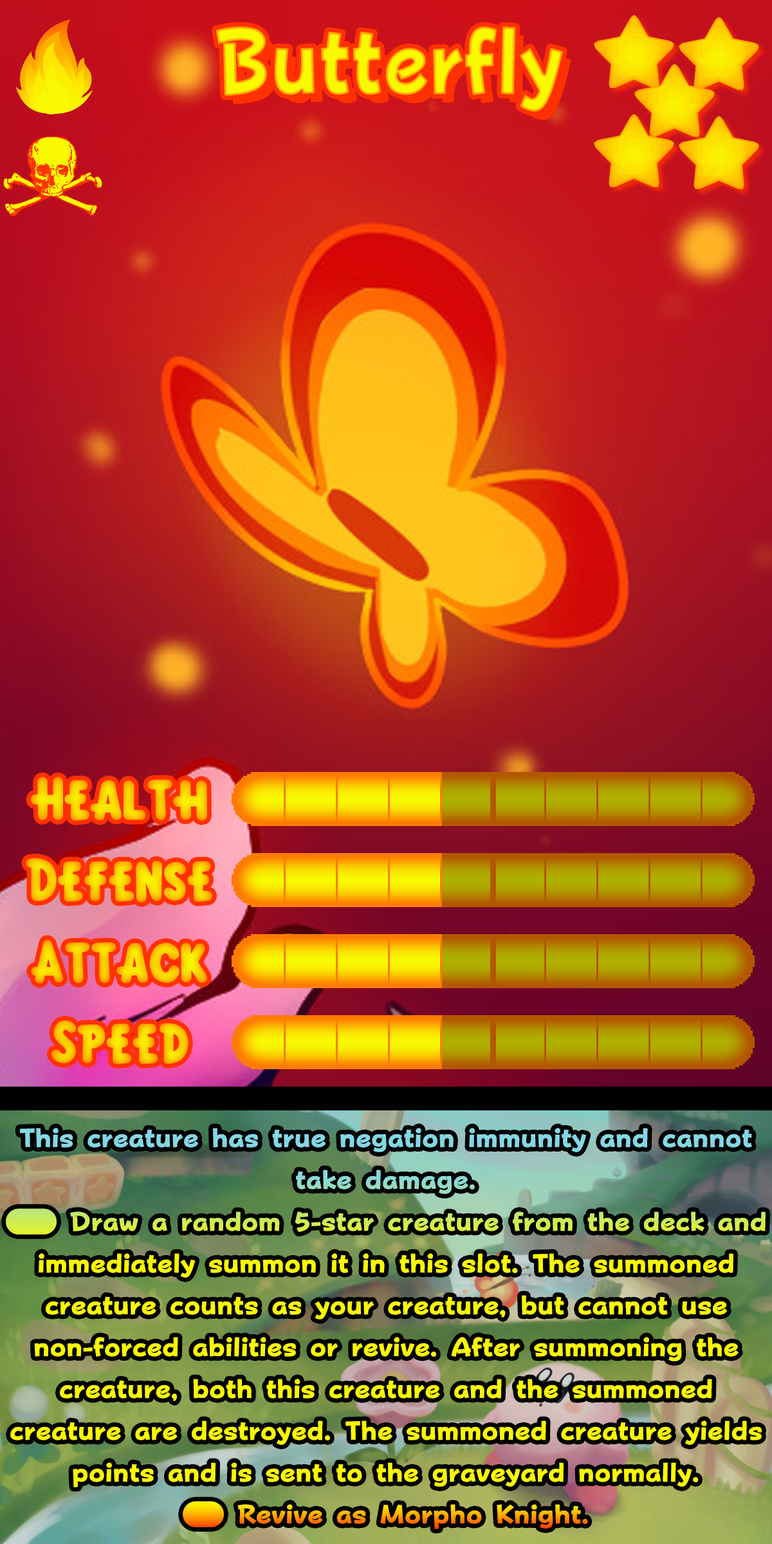
<style>
.page{position:relative;width:772px;height:1544px}
.page>*{position:absolute;margin:0}
.t1{font:160.9px "FOTPopHappinessStrp-ExtraBold";color:#f9f902;scale:0.83 1}
.t2{font:92.7px "KirbyClassic"}
.t3{font:45px/41.8px "FOTPopHappinessStrp-ExtraBold";color:#f9f902}
.t4{font:45px/41.8px "stoogedings-Regular";color:#f9f902}
.t5{font:45px "FOTPopHappinessStrp-ExtraBold"}
.t6{font:45px "stoogedings-Regular"}
</style>
<div class="page">
<p class="t1" style="left:216px;top:26px;width:347px;height:86px">Butterfly</p>
<p class="t2" style="left:30px;top:777px;width:178px;height:44px">Health</p>
<p class="t2" style="left:26px;top:858px;width:186px;height:45px">Defense</p>
<p class="t2" style="left:31px;top:939px;width:176px;height:45px">Attack</p>
<p class="t2" style="left:51px;top:1021px;width:138px;height:43px">Speed</p>
<p class="t3" style="left:6px;top:1128px;width:760px;height:360px;text-align:center">This creature has true negation immunity and cannot take damage.<br><span class="t4">(OFS)</span> Draw a random 5-star creature from the deck and immediately summon it in this slot. The summoned creature counts as your creature, but cannot use non-forced abilities or revive. After summoning the creature, both this creature and the summoned creature are destroyed. The summoned creature yields points and is sent to the graveyard normally.</p>
<p class="t5" style="left:183px;top:1501px;width:405px;height:29px"><span class="t6">(OD)</span> Revive as Morpho Knight.</p>
</div>
